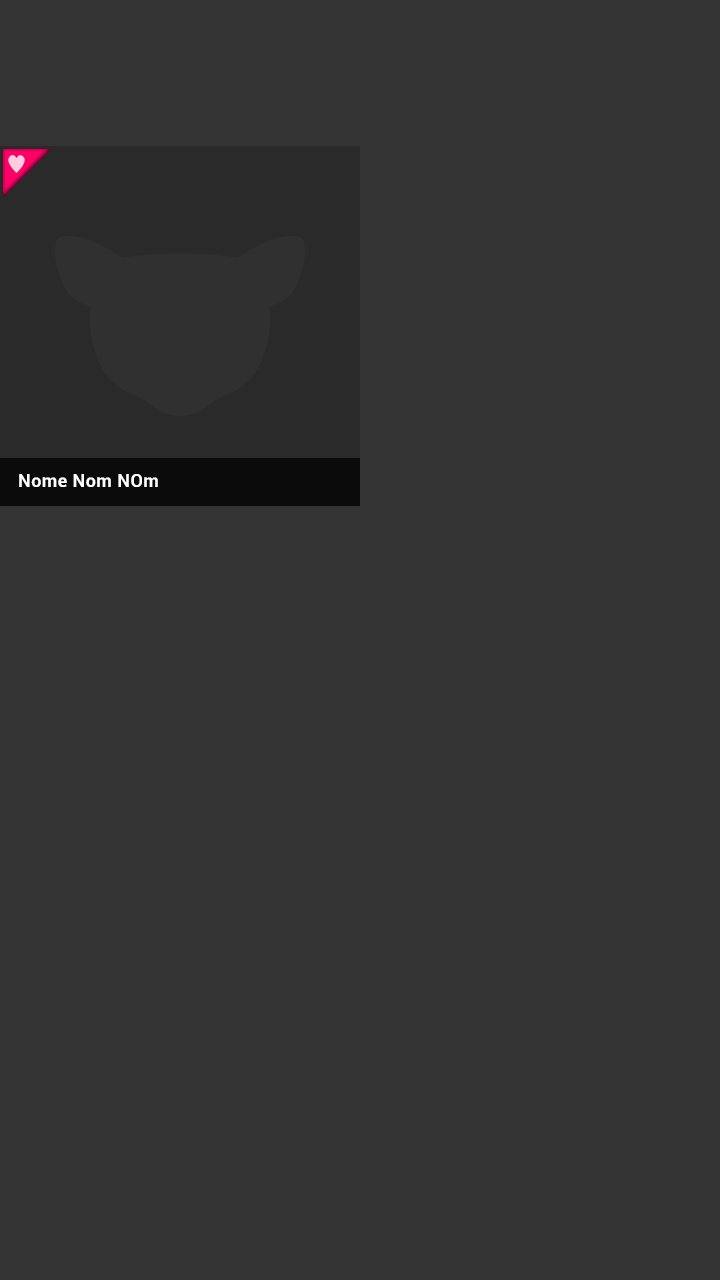
<style>
.page{position:relative;width:720px;height:1280px;background:#333333}
.page>*{position:absolute;margin:0}
.t1{font:18px "Roboto-Bold";letter-spacing:0.025em;color:#ffffff}
</style>
<div class="page">
<p class="t1" style="left:19px;top:474px;width:139px;height:13px">Nome Nom NOm</p>
</div>
